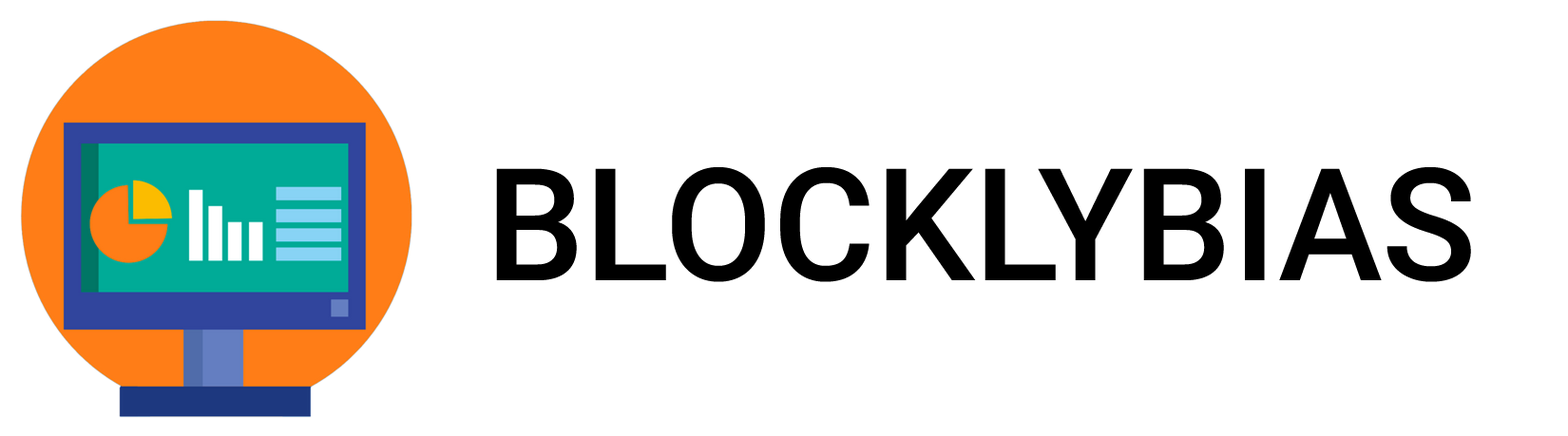
<style>
.page{position:relative;width:1568px;height:436px;background:#ffffff}
.page>*{position:absolute;margin:0}
.t1{font:156.8px "Roboto-Medium";color:#000000}
</style>
<div class="page">
<p class="t1" style="left:496px;top:167px;width:975px;height:115px">BLOCKLYBIAS</p>
</div>
